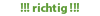
<style>
.page{position:relative;width:100px;height:16px;background:#ffffff}
.page>*{position:absolute;margin:0}
.t1{font:12px "MyriadPro-Bold";color:#5f9c37}
</style>
<div class="page">
<p class="t1" style="left:20px;top:3px;width:59px;height:11px">!!! richtig !!!</p>
</div>
